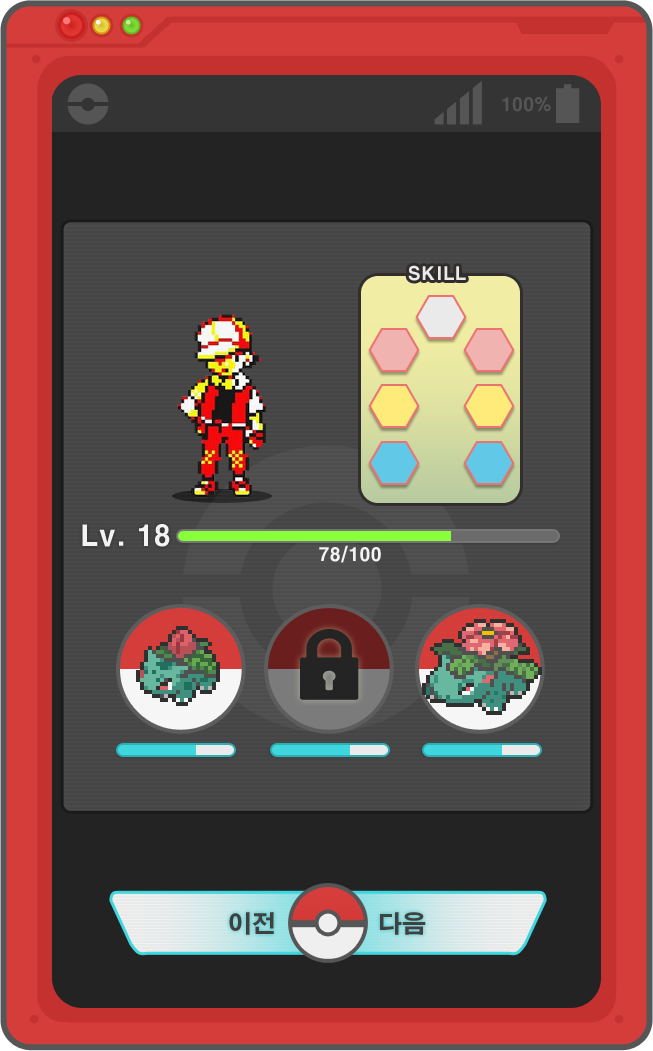
<style>
.page{position:relative;width:653px;height:1051px}
.page>*{position:absolute;margin:0}
.t1{font:18px "H2gtrE";color:#eaeaea}
.t2{font:28px "H2gtrE";color:#f3f3f3}
.t3{font:18px "H2gtrE";color:#f3f3f3}
.t4{font:24px "H2gtrE";color:#404040}
</style>
<div class="page">
<p class="t1" style="left:408px;top:265px;width:58px;height:16px">SKILL</p>
<p class="t2" style="left:82px;top:524px;width:88px;height:23px">Lv. 18</p>
<p class="t3" style="left:319px;top:545px;width:62px;height:18px">78/100</p>
<p class="t4" style="left:229px;top:912px;width:45px;height:23px">이전</p>
<p class="t4" style="left:380px;top:912px;width:46px;height:23px">다음</p>
</div>
